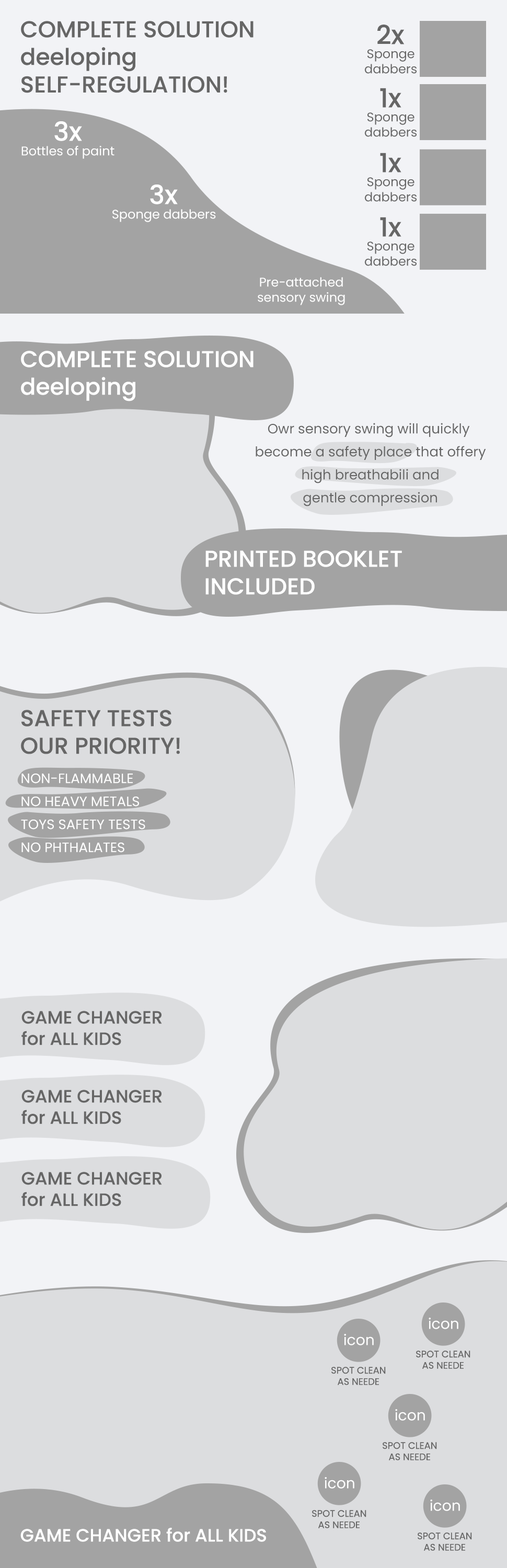
<style>
.page{position:relative;width:507px;height:1568px;background:#dcdddf}
.page>*{position:absolute;margin:0}
.t1{font:23px "Poppins-Medium";color:#666666}
.t2{font:26.1px "Poppins-Medium";color:#666666}
.t3{font:12.5px "Poppins-Regular";color:#666666}
.t4{font:26.1px "Poppins-Medium";color:#ffffff}
.t5{font:12.5px "Poppins-Regular";color:#ffffff}
.t6{font:23px "Poppins-Medium";color:#ffffff}
.t7{font:13.6px/23px "Poppins-Regular";color:#666666}
.t8{font:13.6px/23px "Poppins-Regular";color:#ffffff}
.t9{font:17.8px "Poppins-Medium";color:#666666}
.t10{font:14.7px "Poppins-Regular";color:#ffffff}
.t11{font:9.4px "Poppins-Regular";color:#666666}
.t12{font:17.8px "Poppins-Medium";color:#ffffff}
</style>
<div class="page">
<p class="t1" style="left:21px;top:21px;width:232px;height:72px">COMPLETE SOLUTION<br>deeloping<br>SELF-REGULATION!</p>
<p class="t2" style="left:377px;top:25px;width:28px;height:19px">2x</p>
<p class="t3" style="left:365px;top:49px;width:52px;height:25px;text-align:center">Sponge<br>dabbers</p>
<p class="t2" style="left:380px;top:88px;width:21px;height:20px">1x</p>
<p class="t3" style="left:365px;top:112px;width:52px;height:25px;text-align:center">Sponge<br>dabbers</p>
<p class="t4" style="left:54px;top:121px;width:28px;height:20px">3x</p>
<p class="t5" style="left:21px;top:146px;width:93px;height:13px">Bottles of paint</p>
<p class="t2" style="left:380px;top:153px;width:21px;height:19px">1x</p>
<p class="t4" style="left:150px;top:185px;width:28px;height:19px">3x</p>
<p class="t3" style="left:365px;top:177px;width:52px;height:25px;text-align:center">Sponge<br>dabbers</p>
<p class="t5" style="left:112px;top:209px;width:104px;height:13px">Sponge dabbers</p>
<p class="t2" style="left:380px;top:217px;width:21px;height:20px">1x</p>
<p class="t3" style="left:365px;top:241px;width:52px;height:25px;text-align:center">Sponge<br>dabbers</p>
<p class="t5" style="left:258px;top:277px;width:87px;height:28px;text-align:center">Pre-attached<br>sensory swing</p>
<p class="t6" style="left:21px;top:351px;width:232px;height:50px">COMPLETE SOLUTION<br>deeloping</p>
<p class="t7" style="left:256px;top:423px;width:230px;height:83px;text-align:center">Owr sensory swing will quickly <br>become a safety place that offery<br>high breathabili and<br>gentle compression</p>
<p class="t6" style="left:205px;top:550px;width:197px;height:45px">PRINTED BOOKLET<br>INCLUDED</p>
<p class="t1" style="left:21px;top:710px;width:159px;height:44px">SAFETY TESTS<br>OUR PRIORITY!</p>
<p class="t8" style="left:21px;top:774px;width:124px;height:78px">NON-FLAMMABLE<br>NO HEAVY METALS<br>TOYS SAFETY TESTS <br>NO PHTHALATES</p>
<p class="t9" style="left:21px;top:1011px;width:141px;height:34px">GAME CHANGER<br>for ALL KIDS</p>
<p class="t9" style="left:21px;top:1090px;width:141px;height:34px">GAME CHANGER<br>for ALL KIDS</p>
<p class="t9" style="left:21px;top:1172px;width:141px;height:34px">GAME CHANGER<br>for ALL KIDS</p>
<p class="t10" style="left:429px;top:1318px;width:29px;height:11px">icon</p>
<p class="t10" style="left:344px;top:1334px;width:30px;height:11px">icon</p>
<p class="t11" style="left:416px;top:1351px;width:54px;height:18px;text-align:center">SPOT CLEAN<br>AS NEEDE</p>
<p class="t11" style="left:331px;top:1367px;width:55px;height:18px;text-align:center">SPOT CLEAN<br>AS NEEDE</p>
<p class="t10" style="left:395px;top:1409px;width:30px;height:12px">icon</p>
<p class="t11" style="left:383px;top:1442px;width:54px;height:18px;text-align:center">SPOT CLEAN<br>AS NEEDE</p>
<p class="t10" style="left:325px;top:1477px;width:29px;height:12px">icon</p>
<p class="t10" style="left:430px;top:1500px;width:30px;height:11px">icon</p>
<p class="t11" style="left:312px;top:1510px;width:54px;height:18px;text-align:center">SPOT CLEAN<br>AS NEEDE</p>
<p class="t12" style="left:20px;top:1528px;width:246px;height:14px">GAME CHANGER for ALL KIDS</p>
<p class="t11" style="left:418px;top:1532px;width:54px;height:19px;text-align:center">SPOT CLEAN<br>AS NEEDE</p>
</div>
